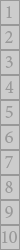
<style>
.page{position:relative;width:20px;height:250px;background:#cccccc}
.page>*{position:absolute;margin:0}
.t1{font:18px "MinionPro-Regular";color:#999999}
</style>
<div class="page">
<p class="t1" style="left:6px;top:6px;width:6px;height:12px">1</p>
<p class="t1" style="left:5px;top:31px;width:8px;height:12px">2</p>
<p class="t1" style="left:5px;top:56px;width:8px;height:12px">3</p>
<p class="t1" style="left:5px;top:81px;width:9px;height:12px">4</p>
<p class="t1" style="left:5px;top:106px;width:8px;height:12px">5</p>
<p class="t1" style="left:5px;top:131px;width:8px;height:12px">6</p>
<p class="t1" style="left:5px;top:156px;width:8px;height:13px">7</p>
<p class="t1" style="left:5px;top:181px;width:8px;height:12px">8</p>
<p class="t1" style="left:5px;top:206px;width:8px;height:12px">9</p>
<p class="t1" style="left:2px;top:231px;width:15px;height:12px">10</p>
</div>
